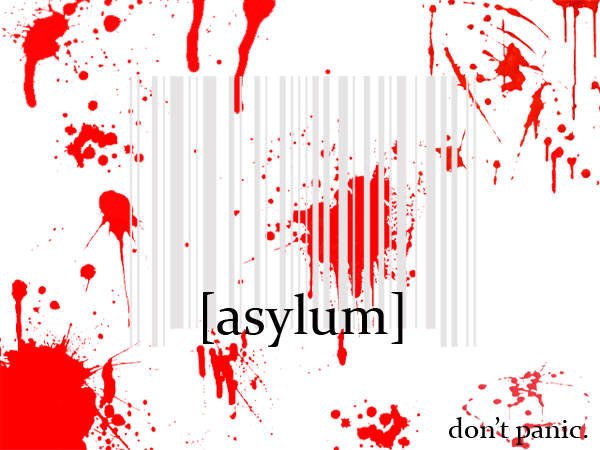
<style>
.page{position:relative;width:600px;height:450px;background:#ffffff}
.page>*{position:absolute;margin:0}
.t1{font:56.2px "Constantia";color:#030000}
.t2{font:28.1px "Constantia";color:#030000}
</style>
<div class="page">
<p class="t1" style="left:203px;top:292px;width:200px;height:55px">[asylum]</p>
<p class="t2" style="left:449px;top:417px;width:139px;height:28px">don’t panic.</p>
</div>
